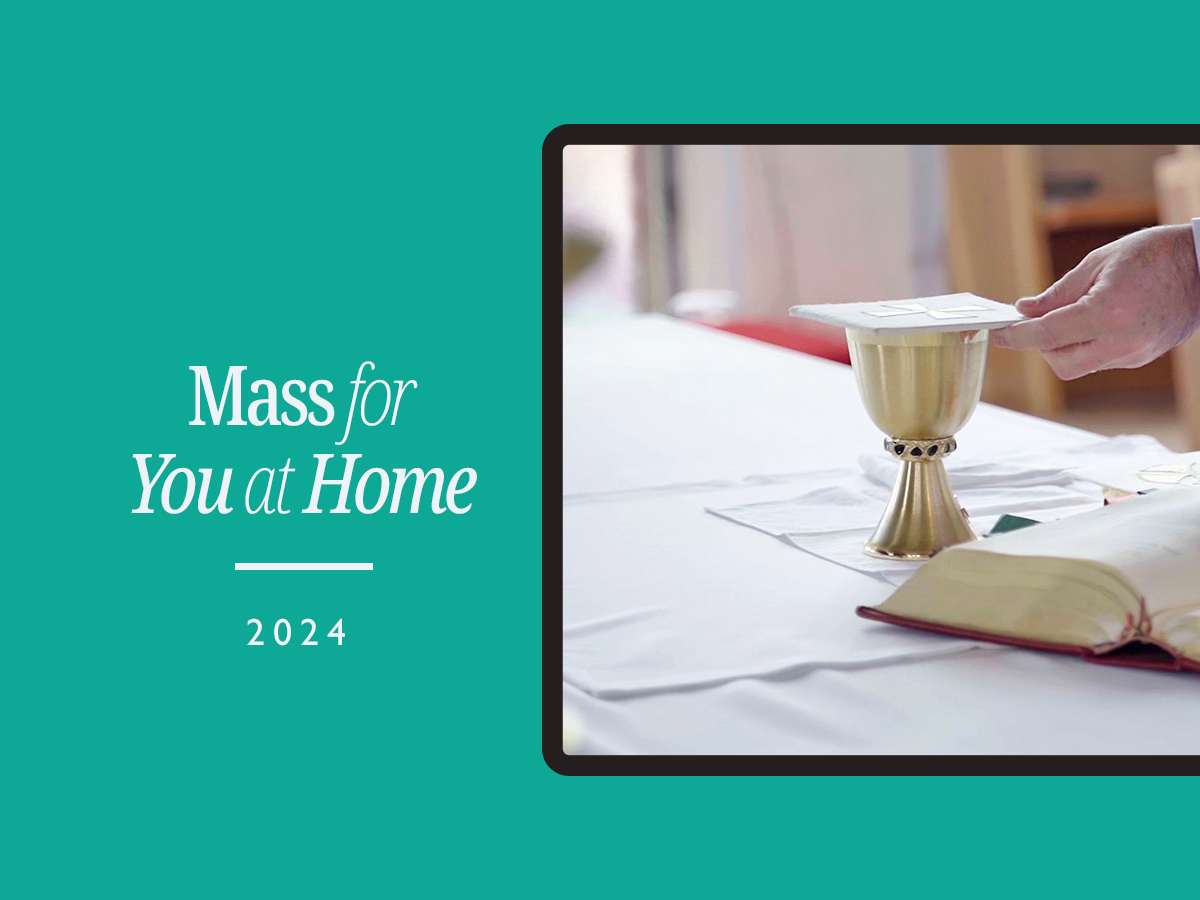
<style>
.page{position:relative;width:1200px;height:900px;background:#0da996}
.page>*{position:absolute;margin:0}
.t1{font:82.7px/88px "NotoSerif-ExtraCondensedMedium";letter-spacing:-0.05em;color:#eef3f7}
.t2{font:82.7px/88px "NotoSerif-ExtraCondensedExtraLightItalic";letter-spacing:-0.05em;color:#eef3f7}
.t3{font:82.7px/88px "NotoSerif-ExtraCondensedItalic";letter-spacing:-0.05em;color:#eef3f7}
.t4{font:38px "GillSans";letter-spacing:0.21em;color:#eef3f7}
</style>
<div class="page">
<p class="t1" style="left:131px;top:361px;width:346px;height:153px;text-align:center">Mass <span class="t2">for<br></span><span class="t3">You </span><span class="t2">at</span><span class="t3"> Home</span></p>
<p class="t4" style="left:247px;top:618px;width:98px;height:28px">2024</p>
</div>
